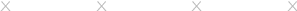
<style>
.page{position:relative;width:297px;height:11px;background:#ffffff}
.page>*{position:absolute;margin:0}
.t1{font:13.3px "OpenSans-Light";color:#b7b7b7;scale:1.35 1}
</style>
<div class="page">
<p class="t1" style="left:0px;top:1px;width:11px;height:11px">X</p>
<p class="t1" style="left:96px;top:1px;width:11px;height:11px">X</p>
<p class="t1" style="left:191px;top:1px;width:11px;height:11px">X</p>
<p class="t1" style="left:287px;top:1px;width:11px;height:11px">X</p>
</div>
